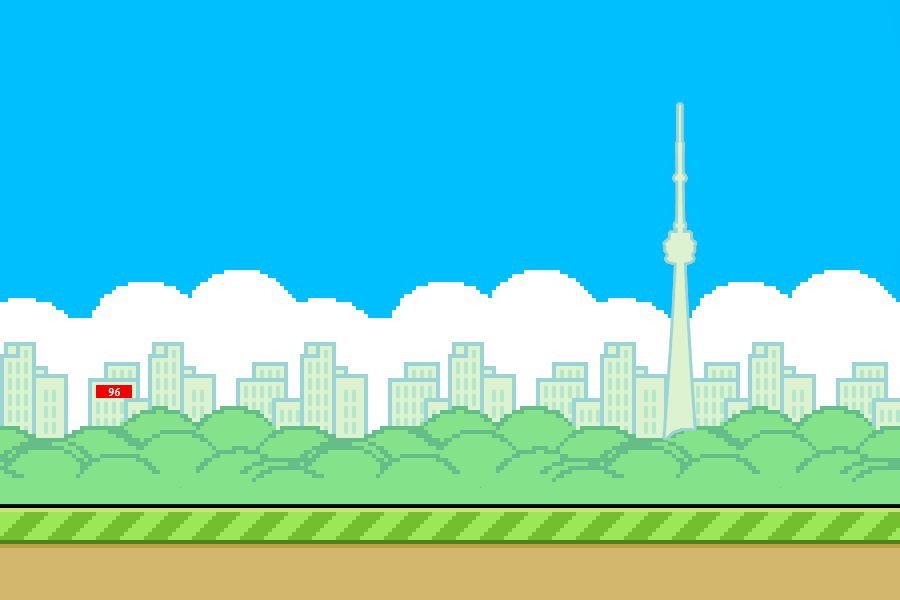
<style>
.page{position:relative;width:900px;height:600px;background:#00bfff}
.page>*{position:absolute;margin:0}
.t1{font:30px "MicrosoftHimalaya";color:#ffffff}
</style>
<div class="page">
<p class="t1" style="left:108px;top:388px;width:12px;height:8px">96</p>
</div>
